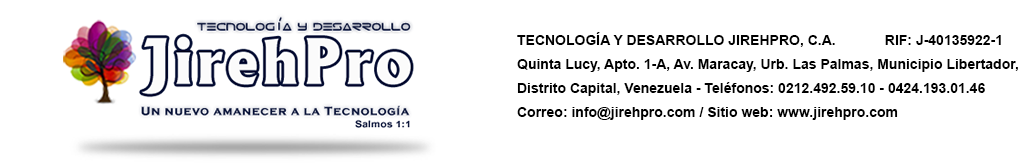
<style>
.page{position:relative;width:1032px;height:166px;background:#ffffff}
.page>*{position:absolute;margin:0}
.t1{font:14px/24px "Arial-BoldMT";color:#000000}
</style>
<div class="page">
<p class="t1" style="left:517px;top:32px;width:501px;height:88px;text-align:justify">TECNOLOGÍA Y DESARROLLO JIREHPRO, C.A.     RIF: J-40135922-1<br>Quinta Lucy, Apto. 1-A, Av. Maracay, Urb. Las Palmas, Municipio Libertador,<br>Distrito Capital, Venezuela - Teléfonos: 0212.492.59.10 - 0424.193.01.46<br>Correo: info@jirehpro.com / Sitio web: www.jirehpro.com</p>
</div>
